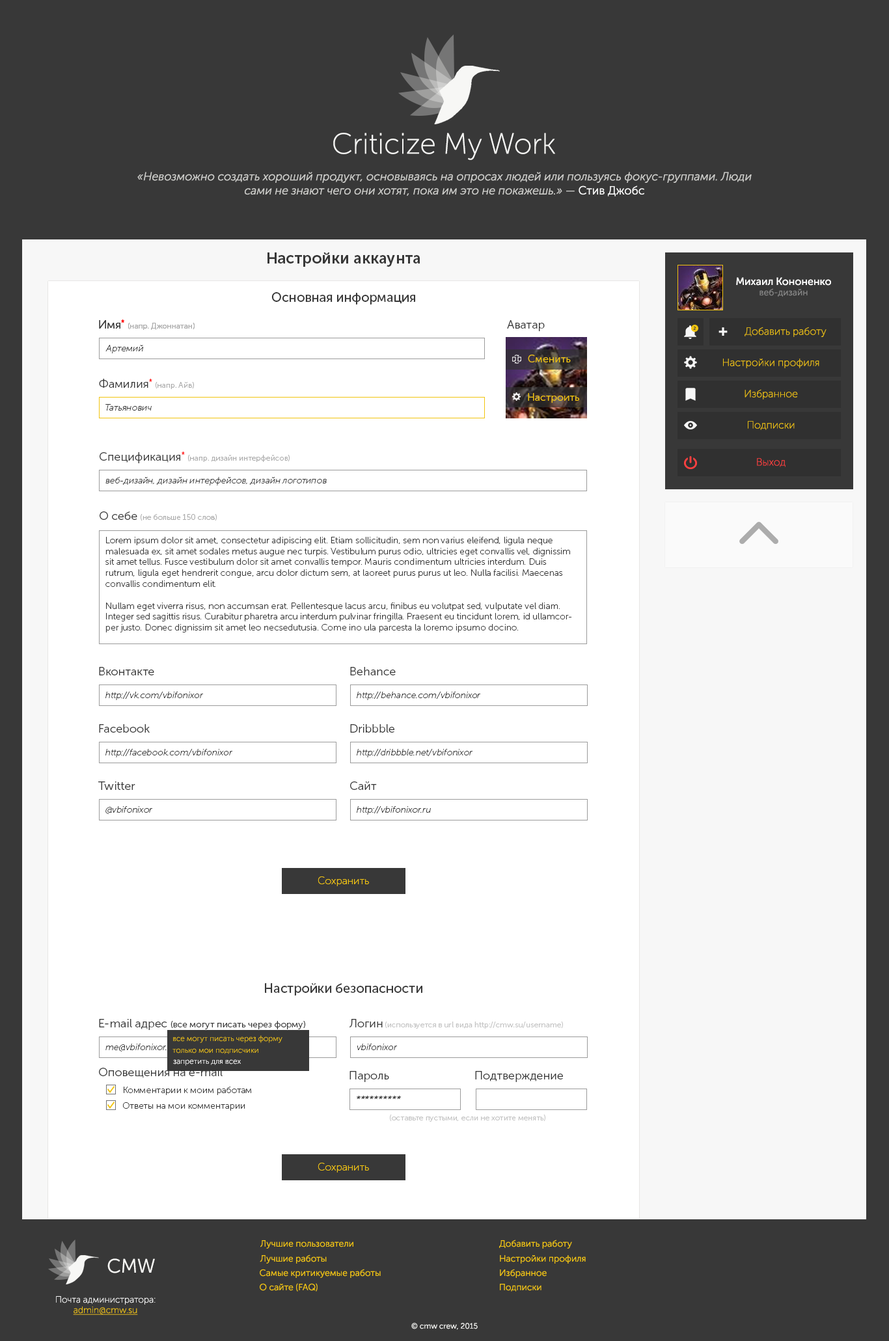
<style>
.page{position:relative;width:889px;height:1341px;background:#ffffff}
.page>*{position:absolute;margin:0}
.t1{font:29.3px "MuseoSansCyrl-100";color:#f7f7f5}
.t2{font:11.7px "MuseoSansCyrl-300Italic";color:#cfcfcc}
.t3{font:11.7px "MuseoSansCyrl-300";color:#cfcfcc}
.t4{font:11.7px "MuseoSansCyrl-300";color:#ffffff}
.t5{font:15.6px "MuseoSansCyrl-700";color:#383838}
.t6{font:10.4px "MuseoSansCyrl-500";color:#ffffff}
.t7{font:13px "MuseoSansCyrl-500";color:#383838}
.t8{font:9.1px "MuseoSansCyrl-300";color:#878787}
.t9{font:7.8px "MuseoSansCyrl-300";color:#adadad}
.t10{font:11.7px "MuseoSansCyrl-300";color:#383838}
.t11{font:11.7px "MuseoSansCyrl-300";color:#ff0000}
.t12{font:4.6px "MuseoSansCyrl-500";color:#383838}
.t13{font:14.3px "MuseoSansCyrl-900";color:#f7f7f7}
.t14{font:10.4px "MuseoSansCyrl-100";color:#f1c40f}
.t15{font:9.1px "MuseoSansCyrl-100Italic";color:#383838}
.t16{font:10.4px "MuseoSansCyrl-300";color:#f1c40f}
.t17{font:10.4px "MuseoSansCyrl-100";color:#ff4040}
.t18{font:9.1px "MuseoSansCyrl-100";color:#383838}
.t19{font:9.1px "MuseoSansCyrl-300";color:#383838}
.t20{font:7.8px "MuseoSansCyrl-300";color:#c4c4c4}
.t21{font:7.8px "MuseoSansCyrl-100";color:#f1c40f}
.t22{font:7.8px "MuseoSansCyrl-100";color:#ffffff}
.t23{font:9.1px "MuseoSansCyrl-300";color:#f1c40f}
.t24{font:19.5px "MuseoSansCyrl-300";color:#f7f7f5}
.t25{font:9.1px "MuseoSansCyrl-100";color:#f7f7f7}
.t26{font:9.1px "MuseoSansCyrl-100";color:#f1c40f;text-decoration:underline}
.t27{font:7.8px "MuseoSansCyrl-300";color:#f7f7f5}
</style>
<div class="page">
<p class="t1" style="left:333px;top:133px;width:222px;height:27px">Criticize My Work</p>
<p class="t2" style="left:137px;top:172px;width:615px;height:25px;text-align:center">«Невозможно создать хороший продукт, основываясь на опросах людей или пользуясь фокус-группами. Люди сами не знают чего они хотят, пока им это не покажешь.» <span class="t3">— </span><span class="t4">Стив Джобс</span></p>
<p class="t5" style="left:267px;top:253px;width:153px;height:14px">Настройки аккаунта</p>
<p class="t6" style="left:736px;top:277px;width:95px;height:9px">Михаил Кононенко</p>
<p class="t7" style="left:271px;top:292px;width:144px;height:13px">Основная информация</p>
<p class="t8" style="left:759px;top:288px;width:49px;height:9px">веб-дизайн</p>
<p class="t9" style="left:99px;top:320px;width:96px;height:10px"><span class="t10">Имя</span><span class="t11">* </span>(напр. Джоннатан)</p>
<p class="t9" style="left:99px;top:320px;width:96px;height:10px"><span class="t10">Имя</span><span class="t11">* </span>(напр. Джоннатан)</p>
<p class="t10" style="left:507px;top:320px;width:38px;height:11px">Аватар</p>
<p class="t12" style="left:693px;top:326px;width:3px;height:4px">2</p>
<p class="t13" style="left:718px;top:327px;width:10px;height:9px">+</p>
<p class="t14" style="left:745px;top:327px;width:82px;height:10px">Добавить работу</p>
<p class="t15" style="left:105px;top:345px;width:39px;height:8px">Артемий</p>
<p class="t16" style="left:528px;top:355px;width:43px;height:7px">Сменить</p>
<p class="t14" style="left:723px;top:359px;width:96px;height:9px">Настройки профиля</p>
<p class="t9" style="left:99px;top:379px;width:95px;height:10px"><span class="t10">Фамилия</span><span class="t11">* </span>(напр. Айв)</p>
<p class="t14" style="left:745px;top:389px;width:53px;height:11px">Избранное</p>
<p class="t16" style="left:528px;top:393px;width:51px;height:10px">Настроить</p>
<p class="t15" style="left:105px;top:404px;width:47px;height:7px">Татьянович</p>
<p class="t14" style="left:748px;top:421px;width:47px;height:9px">Подписки</p>
<p class="t9" style="left:100px;top:452px;width:190px;height:11px"><span class="t10">Спецификация</span><span class="t11">* </span>(напр. дизайн интерфейсов)</p>
<p class="t17" style="left:757px;top:458px;width:29px;height:9px">Выход</p>
<p class="t15" style="left:105px;top:477px;width:222px;height:9px">веб-дизайн, дизайн интерфейсов, дизайн логотипов</p>
<p class="t9" style="left:100px;top:512px;width:117px;height:9px"><span class="t10">О себе </span>(не больше 150 слов)</p>
<p class="t18" style="left:105px;top:537px;width:467px;height:96px">Lorem ipsum dolor sit amet, consectetur adipiscing elit. Etiam sollicitudin, sem non varius eleifend, ligula neque malesuada ex, sit amet sodales metus augue nec turpis. Vestibulum purus odio, ultricies eget convallis vel, dignissim sit amet tellus. Fusce vestibulum dolor sit amet convallis tempor. Mauris condimentum ultricies interdum. Duis rutrum, ligula eget hendrerit congue, arcu dolor dictum sem, at laoreet purus purus ut leo. Nulla facilisi. Maecenas convallis condimentum elit.<br><br>Nullam eget viverra risus, non accumsan erat. Pellentesque lacus arcu, finibus eu volutpat sed, vulputate vel diam. Integer sed sagittis risus. Curabitur pharetra arcu interdum pulvinar fringilla. Praesent eu tincidunt lorem, id ullamcorper justo. Donec dignissim sit amet leo necsedutusia. Come ino ula parcesta la loremo ipsumo docino.</p>
<p class="t10" style="left:99px;top:667px;width:55px;height:9px">Вконтакте</p>
<p class="t10" style="left:350px;top:667px;width:46px;height:9px">Behance</p>
<p class="t15" style="left:105px;top:692px;width:98px;height:8px">http://vk.com/vbifonixor</p>
<p class="t15" style="left:357px;top:692px;width:123px;height:8px">http://behance.com/vbifonixor</p>
<p class="t10" style="left:99px;top:724px;width:51px;height:9px">Facebook</p>
<p class="t10" style="left:350px;top:724px;width:44px;height:9px">Dribbble</p>
<p class="t15" style="left:105px;top:749px;width:127px;height:9px">http://facebook.com/vbifonixor</p>
<p class="t15" style="left:357px;top:749px;width:115px;height:9px">http://dribbble.net/vbifonixor</p>
<p class="t10" style="left:98px;top:782px;width:37px;height:8px">Twitter</p>
<p class="t10" style="left:350px;top:782px;width:27px;height:8px">Сайт</p>
<p class="t15" style="left:105px;top:806px;width:47px;height:8px">@vbifonixor</p>
<p class="t15" style="left:357px;top:806px;width:74px;height:9px">http://vbifonixor.ru</p>
<p class="t14" style="left:318px;top:877px;width:51px;height:9px">Сохранить</p>
<p class="t7" style="left:265px;top:983px;width:157px;height:13px">Настройки безопасности</p>
<p class="t19" style="left:99px;top:1019px;width:206px;height:11px"><span class="t10">E-mail адрес </span>(все могут писать через форму)</p>
<p class="t20" style="left:349px;top:1019px;width:214px;height:10px"><span class="t10">Логин </span>(используется в url вида http://cmw.su/username)</p>
<p class="t21" style="left:173px;top:1035px;width:109px;height:8px">все могут писать через форму</p>
<p class="t15" style="left:105px;top:1044px;width:71px;height:8px">me@vbifonixor.ru</p>
<p class="t21" style="left:172px;top:1048px;width:86px;height:6px">только мои подписчики</p>
<p class="t15" style="left:357px;top:1044px;width:40px;height:6px">vbifonixor</p>
<p class="t22" style="left:173px;top:1060px;width:68px;height:6px">запретить для всех</p>
<p class="t10" style="left:99px;top:1068px;width:124px;height:10px">Оповещения на e-mail</p>
<p class="t10" style="left:349px;top:1071px;width:40px;height:11px">Пароль</p>
<p class="t10" style="left:475px;top:1071px;width:88px;height:11px">Подтверждение</p>
<p class="t18" style="left:124px;top:1087px;width:127px;height:8px">Комментарии к моим работам</p>
<p class="t15" style="left:357px;top:1096px;width:44px;height:3px">**********</p>
<p class="t15" style="left:357px;top:1096px;width:44px;height:3px">**********</p>
<p class="t18" style="left:122px;top:1102px;width:123px;height:9px">Ответы на мои комментарии</p>
<p class="t20" style="left:390px;top:1115px;width:155px;height:7px"><span class="t10"> </span>(оставьте пустыми, если не хотите менять)</p>
<p class="t14" style="left:318px;top:1163px;width:51px;height:10px">Сохранить</p>
<p class="t23" style="left:260px;top:1240px;width:93px;height:9px">Лучшие пользователи</p>
<p class="t23" style="left:499px;top:1240px;width:73px;height:9px">Добавить работу</p>
<p class="t24" style="left:107px;top:1259px;width:48px;height:15px">CMW</p>
<p class="t23" style="left:260px;top:1255px;width:67px;height:9px">Лучшие работы</p>
<p class="t23" style="left:500px;top:1255px;width:86px;height:9px">Настройки профиля</p>
<p class="t23" style="left:260px;top:1269px;width:121px;height:9px">Самые критикуемые работы</p>
<p class="t23" style="left:500px;top:1269px;width:47px;height:9px">Избранное</p>
<p class="t23" style="left:260px;top:1283px;width:58px;height:9px">О сайте (FAQ)</p>
<p class="t23" style="left:500px;top:1284px;width:41px;height:8px">Подписки</p>
<p class="t25" style="left:56px;top:1296px;width:100px;height:9px">Почта администратора:</p>
<p class="t26" style="left:73px;top:1307px;width:65px;height:8px">admin@cmw.su</p>
<p class="t27" style="left:411px;top:1323px;width:67px;height:7px">© cmw crew, 2015</p>
</div>
